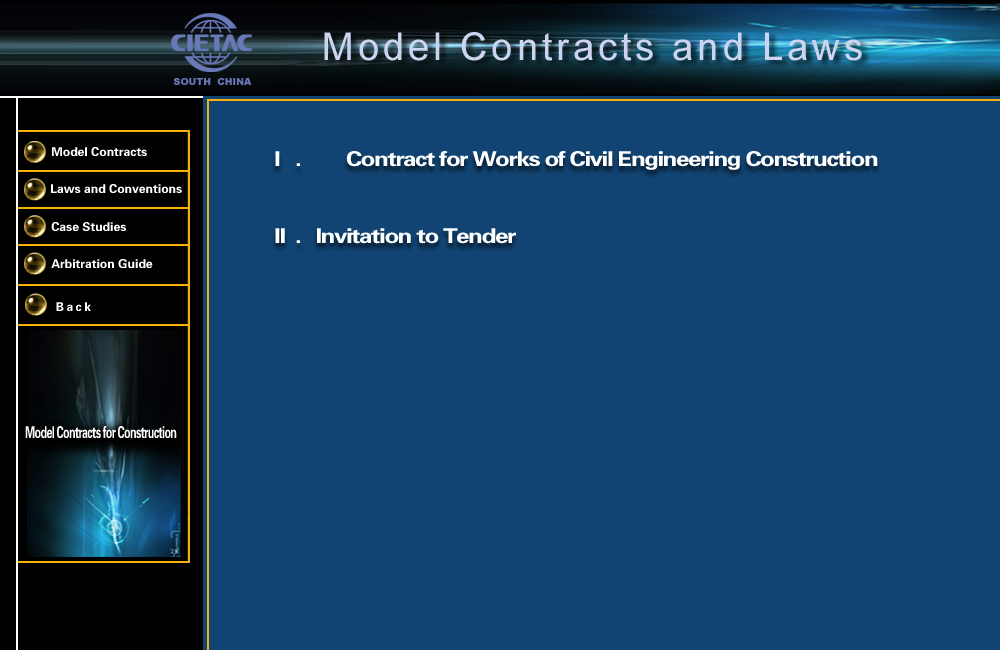
<style>
.page{position:relative;width:1000px;height:650px;background:#114473}
.page>*{position:absolute;margin:0}
.t1{font:12.2px "FZDHTJW--GB1-0";color:#ffffff}
.t2{font:20.2px/25.7px "FZDHTJW--GB1-0";letter-spacing:-0.06em;color:#ffffff;scale:1.2 1}
.t3{font:16.3px "FZDHTJW--GB1-0";letter-spacing:-0.06em;color:#ffffff;scale:0.66 1}
</style>
<div class="page">
<p class="t1" style="left:52px;top:147px;width:95px;height:9px">Model Contracts</p>
<p class="t2" style="left:275px;top:151px;width:603px;height:93px">I   .  Contract for Works of Civil Engineering Construction<br><br><br>II  .  Invitation to Tender</p>
<p class="t1" style="left:51px;top:184px;width:131px;height:9px">Laws and Conventions</p>
<p class="t1" style="left:51px;top:222px;width:75px;height:9px">Case Studies</p>
<p class="t1" style="left:51px;top:259px;width:102px;height:9px">Arbitration Guide</p>
<p class="t3" style="left:25px;top:426px;width:152px;height:12px">Model Contracts for Construction</p>
</div>
